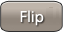
<style>
.page{position:relative;width:63px;height:32px}
.page>*{position:absolute;margin:0}
.t1{font:16px "MyriadPro-Regular";color:#ffffff}
</style>
<div class="page">
<p class="t1" style="left:20px;top:10px;width:24px;height:16px">Flip</p>
</div>
